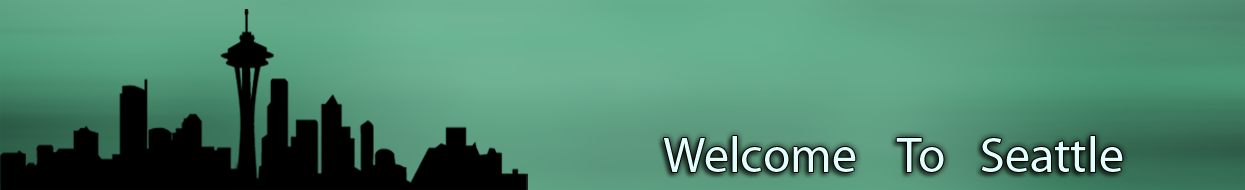
<style>
.page{position:relative;width:1245px;height:190px}
.page>*{position:absolute;margin:0}
.t1{font:50px "MyriadPro-Regular";color:#e1fefd}
</style>
<div class="page">
<p class="t1" style="left:663px;top:136px;width:193px;height:36px">Welcome</p>
<p class="t1" style="left:981px;top:136px;width:142px;height:36px">Seattle</p>
<p class="t1" style="left:896px;top:138px;width:48px;height:34px">To</p>
</div>
